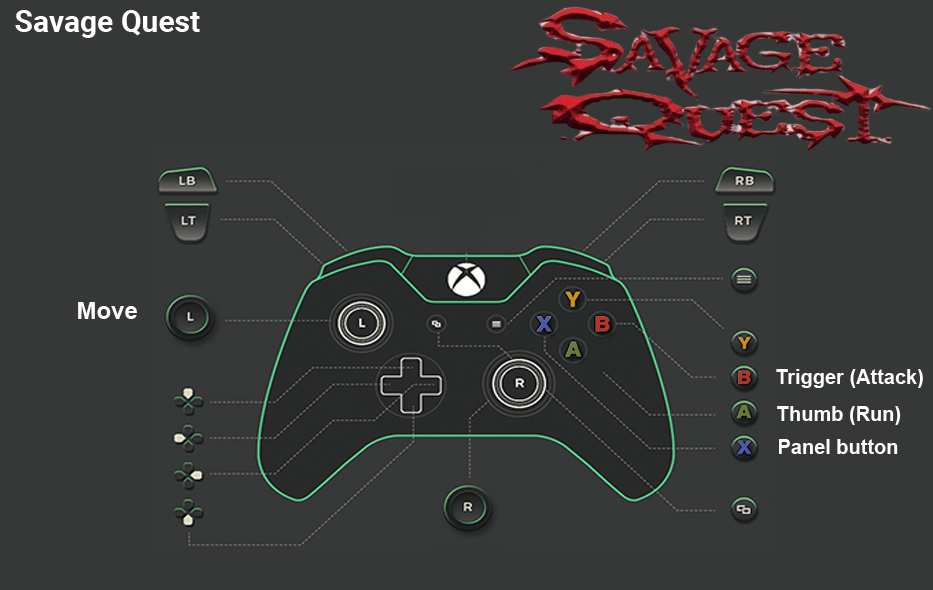
<style>
.page{position:relative;width:933px;height:590px;background:#363838}
.page>*{position:absolute;margin:0}
.t1{font:30px "Roboto-Bold";color:#ffffff}
.t2{font:24px "Arial-BoldMT";color:#fefefe}
.t3{font:20px "Arial-BoldMT";color:#fefefe}
</style>
<div class="page">
<p class="t1" style="left:15px;top:10px;width:185px;height:28px">Savage Quest</p>
<p class="t2" style="left:78px;top:302px;width:59px;height:17px">Move</p>
<p class="t3" style="left:776px;top:369px;width:147px;height:19px">Trigger (Attack)</p>
<p class="t3" style="left:777px;top:406px;width:124px;height:19px">Thumb (Run)</p>
<p class="t3" style="left:779px;top:439px;width:119px;height:15px">Panel button</p>
</div>
